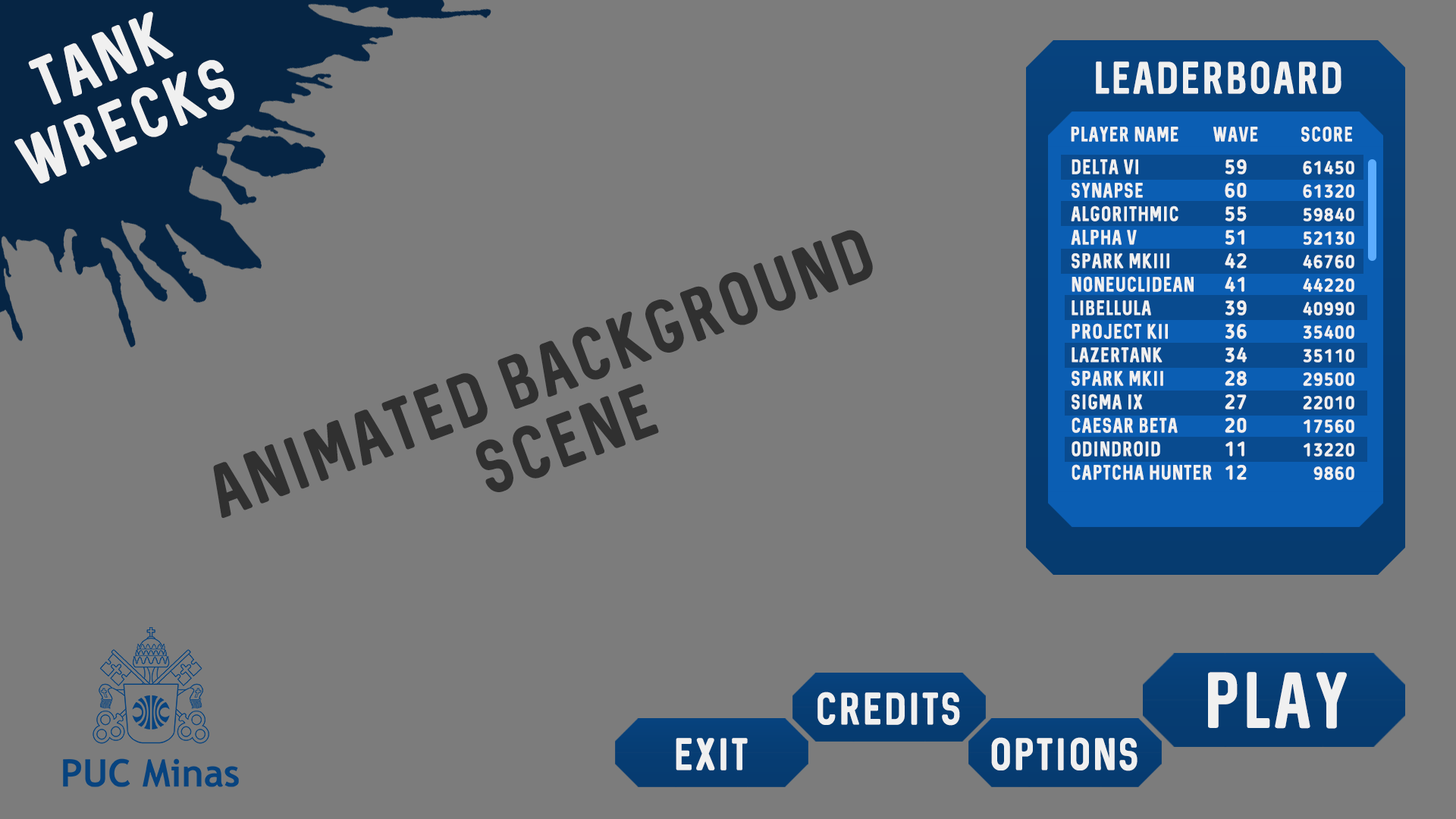
<style>
.page{position:relative;width:1456px;height:819px;background:#7c7c7c}
.page>*{position:absolute;margin:0}
.t1{font:56.6px "Sequel-Regular";letter-spacing:0.075em;color:#f0f0f0;text-transform:uppercase;scale:0.95 1}
.t2{font:36.4px "Sequel-Regular";letter-spacing:0.075em;color:#f0f0f0;text-transform:uppercase;scale:0.95 1}
.t3{font:16.7px "Sequel-Regular";letter-spacing:0.075em;color:#f0f0f0;text-transform:uppercase;scale:0.95 1}
.t4{font:16.7px/23.5px "Sequel-Regular";letter-spacing:0.075em;color:#f0f0f0;text-transform:uppercase;scale:0.95 1}
.t5{font:20.2px/23.5px "BloggerSans-Bold";letter-spacing:0.075em;color:#f0f0f0;text-transform:uppercase;scale:0.95 1}
.t6{font:18.2px/23.5px "BloggerSans-Bold";letter-spacing:0.075em;color:#f0f0f0;text-transform:uppercase;scale:0.95 1}
.t7{font:59.7px "Sequel-Regular";letter-spacing:0.075em;color:#303030;text-transform:uppercase;scale:0.95 1}
.t8{font:63.3px "Sequel-Regular";letter-spacing:0.075em;color:#f0f0f0;text-transform:uppercase;scale:0.95 1}
</style>
<div class="page">
<p class="t1" style="left:14px;top:11px;width:220px;height:173px;text-align:center;rotate:-22deg">Tank<br>Wrecks</p>
<p class="t2" style="left:1096px;top:61px;width:245px;height:33px">leaderboard</p>
<p class="t3" style="left:1071px;top:126px;width:281px;height:16px">player name        wave          score</p>
<p class="t4" style="left:1071px;top:159px;width:141px;height:321px">Delta VI<br>synapse<br>algorithmic<br>alpha v<br>spark mKiii<br>noneuclidean<br>libellula<br>project kii<br>lazertank<br>spark mkii<br>sigma ix<br>caesar beta<br>odindroid<br>captcha hunter</p>
<p class="t5" style="left:1225px;top:159px;width:22px;height:321px;text-align:center">59<br>60<br>55<br>51<br>42<br>41<br>39<br>36<br>34<br>28<br>27<br>20<br>11<br>12</p>
<p class="t6" style="left:1303px;top:161px;width:51px;height:319px;text-align:right">61450<br>61320<br>59840<br>52130<br>46760<br>44220<br>40990<br>35400<br>35110<br>29500<br>22010<br>17560<br>13220<br>9860</p>
<p class="t7" style="left:213px;top:230px;width:660px;height:288px;text-align:center;rotate:-20deg">animated background<br>scene</p>
<p class="t8" style="left:1208px;top:672px;width:139px;height:57px">Play</p>
<p class="t2" style="left:817px;top:692px;width:143px;height:34px">credits</p>
<p class="t2" style="left:676px;top:738px;width:72px;height:32px">Exit</p>
<p class="t2" style="left:991px;top:737px;width:146px;height:34px">options</p>
</div>
